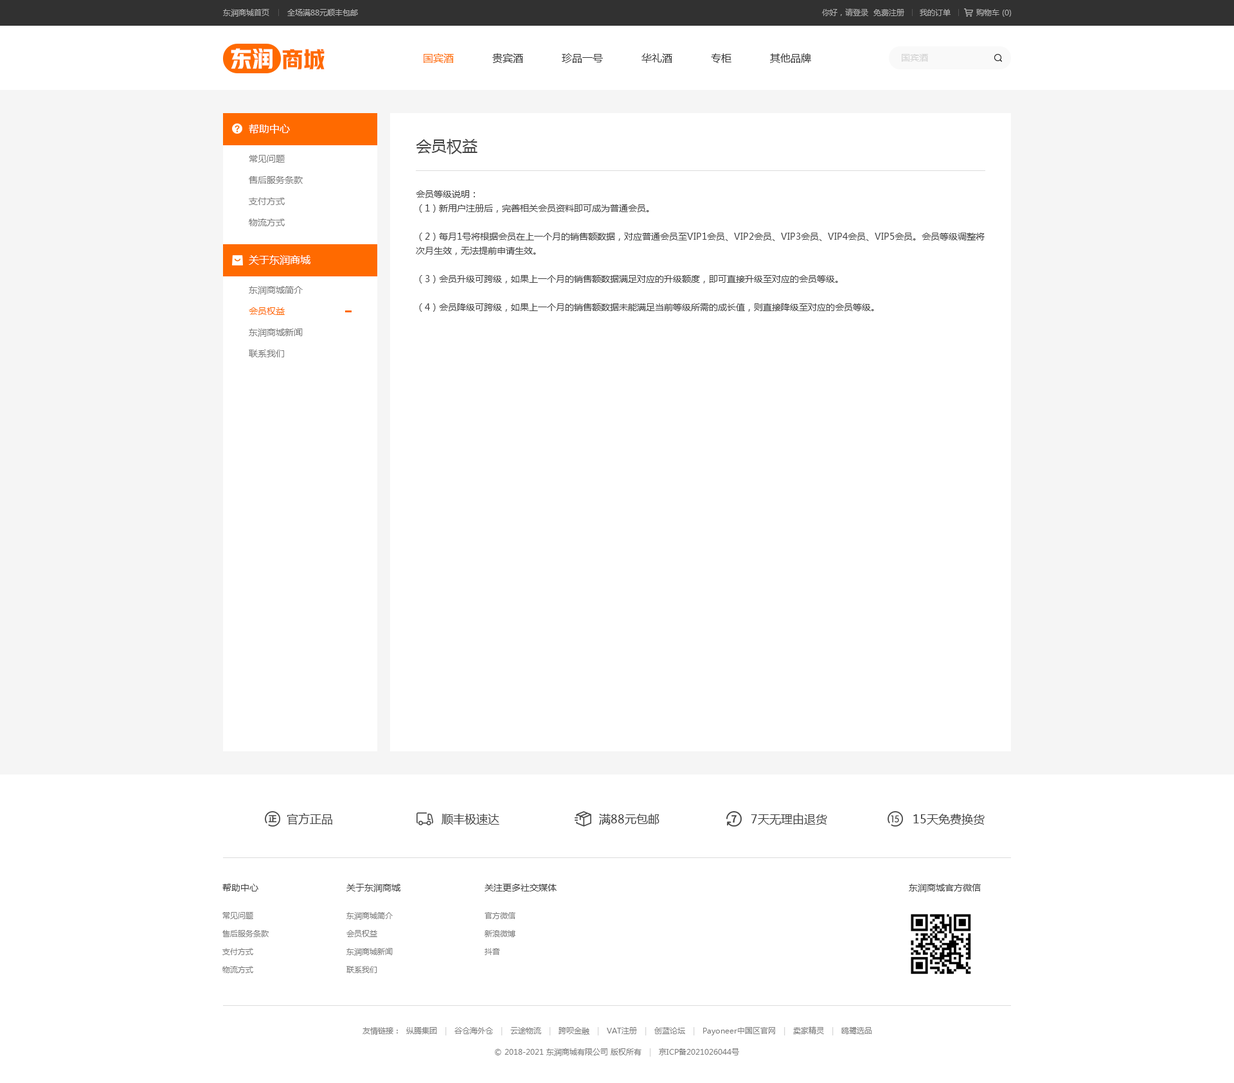
<style>
.page{position:relative;width:1234px;height:1083px;background:#ffffff}
.page>*{position:absolute;margin:0}
.t1{font:7.7px "MicrosoftYaHei";color:#b0b0b0}
.t2{font:7.7px "MicrosoftYaHei";color:#acacac}
.t3{font:21.9px "HYYakuHei-HEW";color:#ffffff}
.t4{font:21.9px "HYYakuHei-HEW";color:#ff6a00}
.t5{font:10.3px "MicrosoftYaHei";color:#333333}
.t6{font:10.3px "MicrosoftYaHei";color:#ff6a00}
.t7{font:9px "MicrosoftYaHei";color:#d2d2d2}
.t8{font:10.3px "MicrosoftYaHei";color:#ffffff}
.t9{font:15.4px "MicrosoftYaHei";color:#434343}
.t10{font:9px/21.2px "MicrosoftYaHei";color:#7d7d7d}
.t11{font:9px/14.1px "MicrosoftYaHei";color:#434343}
.t12{font:9px/21.2px "MicrosoftYaHei";color:#ff6a00}
.t13{font:11.6px "MicrosoftYaHei";color:#434343}
.t14{font:9px "MicrosoftYaHei";color:#434343}
.t15{font:7.7px/18px "MicrosoftYaHei";color:#7d7d7d}
.t16{font:7.7px "MicrosoftYaHei";color:#7d7d7d}
.t17{font:7.7px "MicrosoftYaHei";color:#d2d2d2}
</style>
<div class="page">
<p class="t1" style="left:223px;top:9px;width:135px;height:8px">东润商城首页       全场满88元顺丰包邮</p>
<p class="t2" style="left:822px;top:8px;width:190px;height:9px">你好，请登录  免费注册      我的订单          购物车 (0)</p>
<p class="t3" style="left:231px;top:48px;width:42px;height:21px">东润</p>
<p class="t4" style="left:282px;top:49px;width:43px;height:20px">商城</p>
<p class="t5" style="left:424px;top:53px;width:387px;height:10px"><span class="t6">国宾酒</span>            贵宾酒            珍品一号            华礼酒            专柜            其他品牌</p>
<p class="t7" style="left:902px;top:54px;width:26px;height:8px">国宾酒</p>
<p class="t8" style="left:249px;top:124px;width:41px;height:10px">帮助中心</p>
<p class="t9" style="left:416px;top:139px;width:62px;height:15px">会员权益</p>
<p class="t10" style="left:249px;top:155px;width:54px;height:71px">常见问题<br>售后服务条款<br>支付方式<br>物流方式</p>
<p class="t11" style="left:416px;top:190px;width:569px;height:122px">会员等级说明：<br>（1）新用户注册后，完善相关会员资料即可成为普通会员。<br><br>（2）每月1号将根据会员在上一个月的销售额数据，对应普通会员至VIP1会员、VIP2会员、VIP3会员、VIP4会员、VIP5会员。会员等级调整将次月生效，无法提前申请生效。<br><br>（3）会员升级可跨级，如果上一个月的销售额数据满足对应的升级额度，即可直接升级至对应的会员等级。<br><br>（4）会员降级可跨级，如果上一个月的销售额数据未能满足当前等级所需的成长值，则直接降级至对应的会员等级。</p>
<p class="t8" style="left:249px;top:255px;width:61px;height:10px">关于东润商城</p>
<p class="t8" style="left:249px;top:255px;width:61px;height:10px">关于东润商城</p>
<p class="t10" style="left:249px;top:286px;width:54px;height:71px">东润商城简介<br><span class="t12">会员权益<br></span>东润商城新闻<br>联系我们</p>
<p class="t13" style="left:287px;top:813px;width:45px;height:12px">官方正品</p>
<p class="t13" style="left:442px;top:814px;width:58px;height:11px">顺丰极速达</p>
<p class="t13" style="left:599px;top:814px;width:61px;height:11px">满88元包邮</p>
<p class="t13" style="left:751px;top:813px;width:76px;height:12px">7天无理由退货</p>
<p class="t13" style="left:914px;top:814px;width:71px;height:11px">15天免费换货</p>
<p class="t14" style="left:222px;top:884px;width:36px;height:8px">帮助中心</p>
<p class="t14" style="left:346px;top:884px;width:55px;height:8px">关于东润商城</p>
<p class="t14" style="left:485px;top:884px;width:72px;height:8px">关注更多社交媒体</p>
<p class="t14" style="left:909px;top:884px;width:72px;height:8px">东润商城官方微信</p>
<p class="t15" style="left:222px;top:912px;width:47px;height:61px">常见问题<br>售后服务条款<br>支付方式<br>物流方式</p>
<p class="t15" style="left:346px;top:912px;width:47px;height:61px">东润商城简介<br>会员权益<br>东润商城新闻<br>联系我们</p>
<p class="t15" style="left:485px;top:912px;width:31px;height:43px">官方微信<br>新浪微博<br>抖音</p>
<p class="t16" style="left:363px;top:1027px;width:509px;height:9px">友情链接：  纵腾集团   <span class="t17">|   </span>谷仓海外仓   <span class="t17">|   </span>云途物流   <span class="t17">|   </span>跨呗金融   <span class="t17">|   </span>VAT注册   <span class="t17">|   </span>创蓝论坛   <span class="t17">|   </span>Payoneer中国区官网   <span class="t17">|   </span>卖家精灵   <span class="t17">|   </span>鸥鹭选品</p>
<p class="t16" style="left:495px;top:1048px;width:244px;height:9px">© 2018-2021 东润商城有限公司 版权所有   <span class="t17">|   </span>京ICP备2021026044号</p>
</div>
